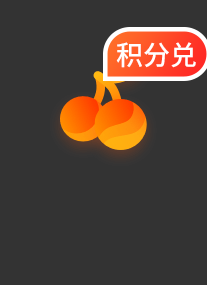
<style>
.page{position:relative;width:207px;height:285px;background:#333333}
.page>*{position:absolute;margin:0}
.t1{font:27px "SourceHanSansCN-Medium";color:#ffffff}
</style>
<div class="page">
<p class="t1" style="left:116px;top:42px;width:80px;height:26px">积分兑</p>
</div>
